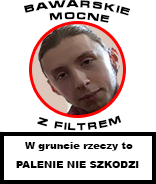
<style>
.page{position:relative;width:156px;height:184px;background:#ffffff}
.page>*{position:absolute;margin:0}
.t1{font:10px "MicraC-Bold";color:#000000}
.t2{font:10px "Arial-Black";color:#000000}
</style>
<div class="page">
<p class="t1" style="left:23px;top:0px;width:108px;height:23px">bawarskie <br>     mocne</p>
<p class="t1" style="left:37px;top:115px;width:85px;height:16px;rotate:-8deg">z filtrem</p>
<p class="t2" style="left:25px;top:142px;width:108px;height:9px">W gruncie rzeczy to</p>
<p class="t2" style="left:16px;top:161px;width:123px;height:7px">PALENIE NIE SZKODZI</p>
</div>
